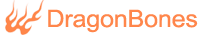
<style>
.page{position:relative;width:200px;height:36px;background:#ffffff}
.page>*{position:absolute;margin:0}
.t1{font:24px "ArialMT";letter-spacing:-0.01em;color:#ff864b;scale:1.05 1}
</style>
<div class="page">
<p class="t1" style="left:48px;top:9px;width:150px;height:24px">DragonBones</p>
</div>
